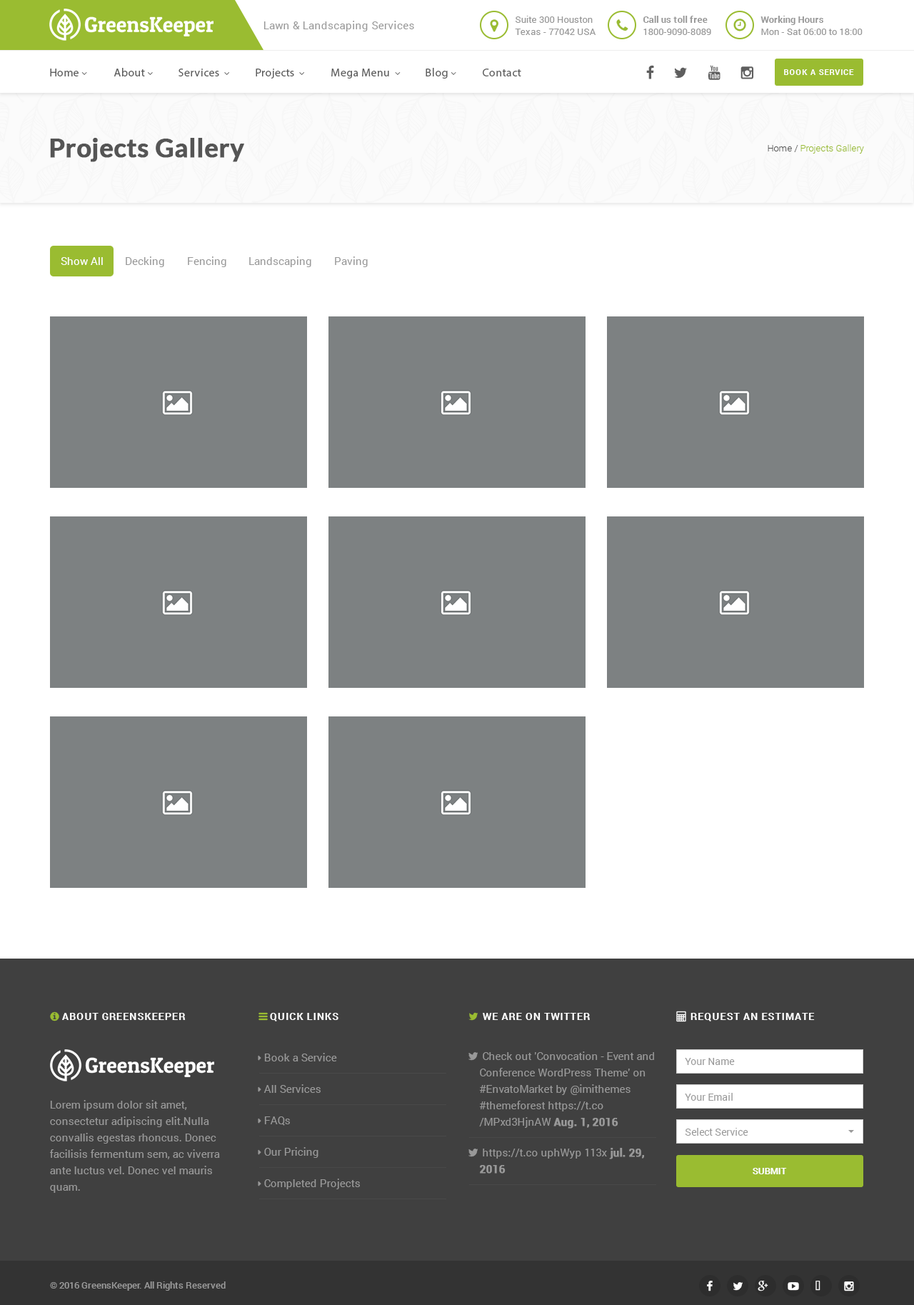
<style>
.page{position:relative;width:914px;height:1305px;background:#ffffff}
.page>*{position:absolute;margin:0}
.t1{font:9.3px/12.1px "Roboto-Regular";letter-spacing:0.02em;color:#999999}
.t2{font:9.3px/12.1px "Roboto-Bold";letter-spacing:0.02em;color:#999999}
.t3{font:10.7px "Roboto-Regular";letter-spacing:0.02em;color:#999999}
.t4{font:11.4px "MyriadPro-Regular";letter-spacing:0.02em;color:#5e5e5e}
.t5{font:7.9px "Roboto-Bold";letter-spacing:0.08em;color:#ffffff;text-transform:uppercase}
.t6{font:25.7px "Lato-Bold";color:#555555;font-weight:bold}
.t7{font:9.3px "Roboto-Light";color:#9abc31}
.t8{font:9.3px "Roboto-Light";color:#555555}
.t9{font:10.7px "Roboto-Regular";color:#ffffff}
.t10{font:10.7px "Roboto-Regular";color:#999999}
.t11{font:10px "Roboto-Bold";letter-spacing:0.08em;color:#ffffff;text-transform:uppercase}
.t12{font:10.7px/16.4px "Roboto-Regular";color:#999999}
.t13{font:10.7px/16.4px "Roboto-Bold";color:#999999;font-weight:bold}
.t14{font:10px "Roboto-Regular";color:#999999}
.t15{font:9.3px "Roboto-Bold";color:#ffffff;text-transform:uppercase}
.t16{font:9.3px "Roboto-Medium";color:#999999}
</style>
<div class="page">
<p class="t1" style="left:515px;top:16px;width:81px;height:19px">Suite 300 Houston<br>Texas - 77042 USA</p>
<p class="t2" style="left:643px;top:16px;width:68px;height:19px">Call us toll free<br><span class="t1">1800-9090-8089</span></p>
<p class="t1" style="left:760px;top:16px;width:103px;height:19px"><span class="t2">Working Hours<br></span>Mon - Sat 06:00 to 18:00</p>
<p class="t3" style="left:263px;top:21px;width:151px;height:10px">Lawn &amp; Landscaping Services</p>
<p class="t4" style="left:483px;top:69px;width:38px;height:7px">Contact</p>
<p class="t5" style="left:784px;top:69px;width:70px;height:6px">Book a service</p>
<p class="t6" style="left:50px;top:138px;width:194px;height:24px">Projects Gallery</p>
<p class="t7" style="left:768px;top:144px;width:96px;height:10px"><span class="t8">Home / </span>Projects Gallery</p>
<p class="t9" style="left:61px;top:257px;width:42px;height:8px">Show All</p>
<p class="t10" style="left:126px;top:256px;width:38px;height:11px">Decking</p>
<p class="t10" style="left:188px;top:256px;width:38px;height:11px">Fencing</p>
<p class="t10" style="left:249px;top:256px;width:62px;height:11px">Landscaping</p>
<p class="t10" style="left:335px;top:256px;width:33px;height:11px">Paving</p>
<p class="t11" style="left:62px;top:1013px;width:124px;height:7px">About GreensKeeper</p>
<p class="t11" style="left:270px;top:1013px;width:68px;height:8px">Quick Links</p>
<p class="t11" style="left:483px;top:1013px;width:107px;height:7px">We are on Twitter</p>
<p class="t11" style="left:691px;top:1013px;width:124px;height:8px">Request an Estimate</p>
<p class="t10" style="left:264px;top:1053px;width:73px;height:8px">Book a Service</p>
<p class="t12" style="left:479px;top:1051px;width:175px;height:77px">Check out 'Convocation - Event and <br>Conference WordPress Theme' on<br>#EnvatoMarket by @imithemes<br>#themeforest https://t.co<br>/MPxd3HjnAW <span class="t13">Aug. 1, 2016</span></p>
<p class="t14" style="left:685px;top:1058px;width:50px;height:7px">Your Name</p>
<p class="t10" style="left:263px;top:1084px;width:58px;height:9px">All Services</p>
<p class="t14" style="left:685px;top:1093px;width:48px;height:7px">Your Email</p>
<p class="t12" style="left:50px;top:1100px;width:170px;height:93px">Lorem ipsum dolor sit amet, <br>consectetur adipiscing elit.Nulla <br>convallis egestas rhoncus. Donec <br>facilisis fermentum sem, ac viverra <br>ante luctus vel. Donec vel mauris <br>quam.</p>
<p class="t10" style="left:264px;top:1116px;width:26px;height:9px">FAQs</p>
<p class="t14" style="left:685px;top:1128px;width:63px;height:7px">Select Service</p>
<p class="t10" style="left:264px;top:1147px;width:54px;height:11px">Our Pricing</p>
<p class="t12" style="left:480px;top:1148px;width:164px;height:25px">https://t.co uphWyp 113x<span class="t13"> jul. 29,<br>2016</span></p>
<p class="t15" style="left:753px;top:1168px;width:34px;height:6px">Submit</p>
<p class="t10" style="left:264px;top:1178px;width:96px;height:11px">Completed Projects</p>
<p class="t16" style="left:50px;top:1281px;width:176px;height:9px">© 2016 GreensKeeper. All Rights Reserved</p>
</div>
